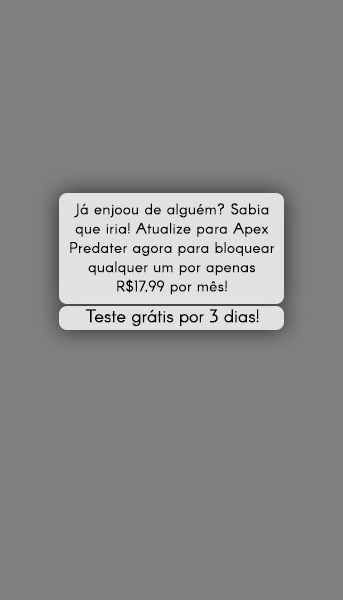
<style>
.page{position:relative;width:343px;height:600px;background:#7f7f7f}
.page>*{position:absolute;margin:0}
.t1{font:15px/22.2px "Arcon-Regular";letter-spacing:0.031em;color:#000000}
.t2{font:18px "Arcon-Regular";color:#000000}
</style>
<div class="page">
<p class="t1" style="left:70px;top:203px;width:205px;height:92px;text-align:center">Já enjoou de alguém? Sabia<br>que iria! Atualize para Apex<br>Predater agora para bloquear<br>qualquer um por apenas<br>R$17,99 por mês!</p>
<p class="t2" style="left:85px;top:309px;width:174px;height:18px">Teste grátis por 3 dias!</p>
</div>
